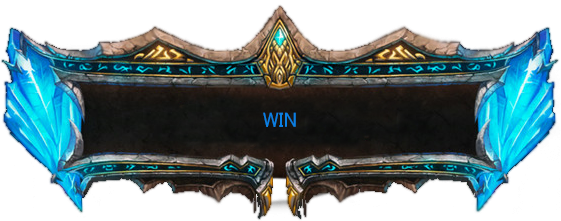
<style>
.page{position:relative;width:561px;height:221px;background:#ffffff}
.page>*{position:absolute;margin:0}
.t1{font:21px "MS-PGothic";color:#0b7fe2}
</style>
<div class="page">
<p class="t1" style="left:263px;top:112px;width:33px;height:15px">WIN</p>
</div>
